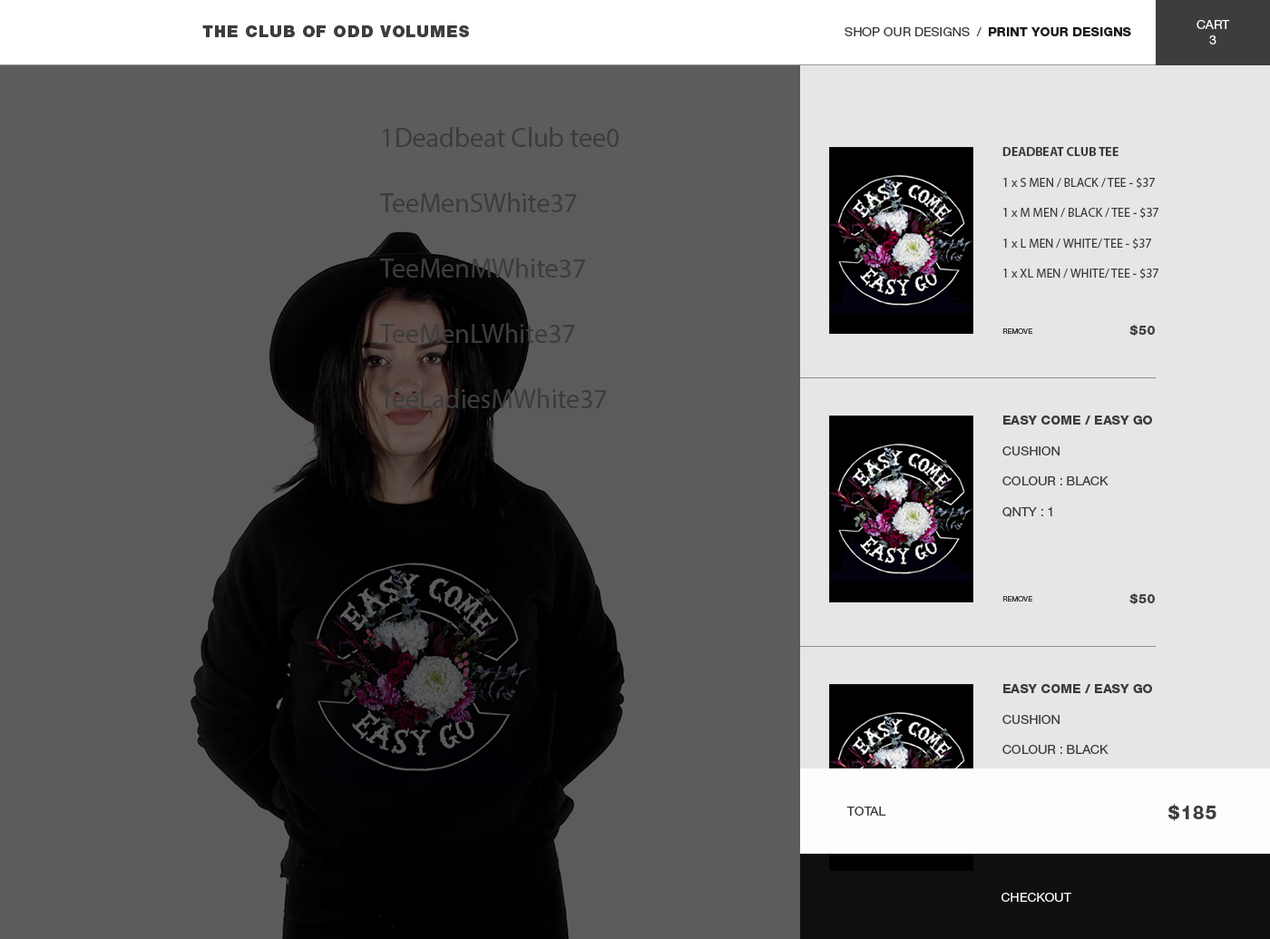
<style>
.page{position:relative;width:1270px;height:939px;background:#5b5b5b}
.page>*{position:absolute;margin:0}
.t1{font:16.3px "HelveticaNeueLTStd-Blk";letter-spacing:0.05em;color:#3d3d3d}
.t2{font:12.7px "HelveticaNeueLTStd-Roman";color:#3d3d3d}
.t3{font:12.7px "HelveticaNeueLTStd-Hv";color:#1b1b1b}
.t4{font:12.7px "HelveticaNeueLTStd-Roman";color:#ffffff}
.t5{font:12.7px "MyriadPro-Regular";color:#3c3c3c}
.t6{font:12.7px "MyriadPro-Bold";color:#3c3c3c}
.t7{font:7.3px "HelveticaNeueLTStd-Roman";color:#3c3c3c}
.t8{font:12.7px "HelveticaNeueLTStd-Hv";letter-spacing:0.05em;color:#3e3e3e}
.t9{font:12.7px "HelveticaNeueLTStd-Roman";color:#3c3c3c}
.t10{font:12.7px "HelveticaNeueLTStd-Hv";color:#3c3c3c}
.t11{font:18.1px "HelveticaNeueLTStd-Hv";letter-spacing:0.05em;color:#3e3e3e}
</style>
<div class="page">
<p class="t1" style="left:202px;top:25px;width:267px;height:12px">THE CLUB OF ODD VOLUMES</p>
<p class="t2" style="left:845px;top:27px;width:286px;height:9px">SHOP OUR DESIGNS  /  <span class="t3">PRINT YOUR DESIGNS</span></p>
<p class="t4" style="left:1197px;top:20px;width:33px;height:24px;text-align:center">CART<br>3</p>
<p class="t5" style="left:1002px;top:147px;width:156px;height:132px"><span class="t6">DEADBEAT CLUB TEE<br></span><br>1 x S MEN / BLACK / TEE - $37<br><br>1 x M MEN / BLACK / TEE - $37<br><br>1 x L MEN / WHITE/ TEE - $37<br><br>1 x XL MEN / WHITE/ TEE - $37</p>
<p class="t7" style="left:1002px;top:328px;width:30px;height:6px">REMOVE</p>
<p class="t8" style="left:1129px;top:324px;width:26px;height:13px">$50</p>
<p class="t9" style="left:1002px;top:415px;width:150px;height:102px"><span class="t10">EASY COME / EASY GO<br></span><br>CUSHION<br><br>COLOUR : BLACK<br><br>QNTY : 1</p>
<p class="t8" style="left:1129px;top:592px;width:26px;height:13px">$50</p>
<p class="t7" style="left:1002px;top:596px;width:30px;height:5px">REMOVE</p>
<p class="t9" style="left:1002px;top:684px;width:150px;height:102px"><span class="t10">EASY COME / EASY GO<br></span><br>CUSHION<br><br>COLOUR : BLACK<br><br>QNTY : 1</p>
<p class="t9" style="left:846px;top:806px;width:40px;height:10px">TOTAL</p>
<p class="t11" style="left:1168px;top:804px;width:48px;height:17px">$185</p>
<p class="t4" style="left:1002px;top:893px;width:69px;height:9px">CHECKOUT</p>
</div>
